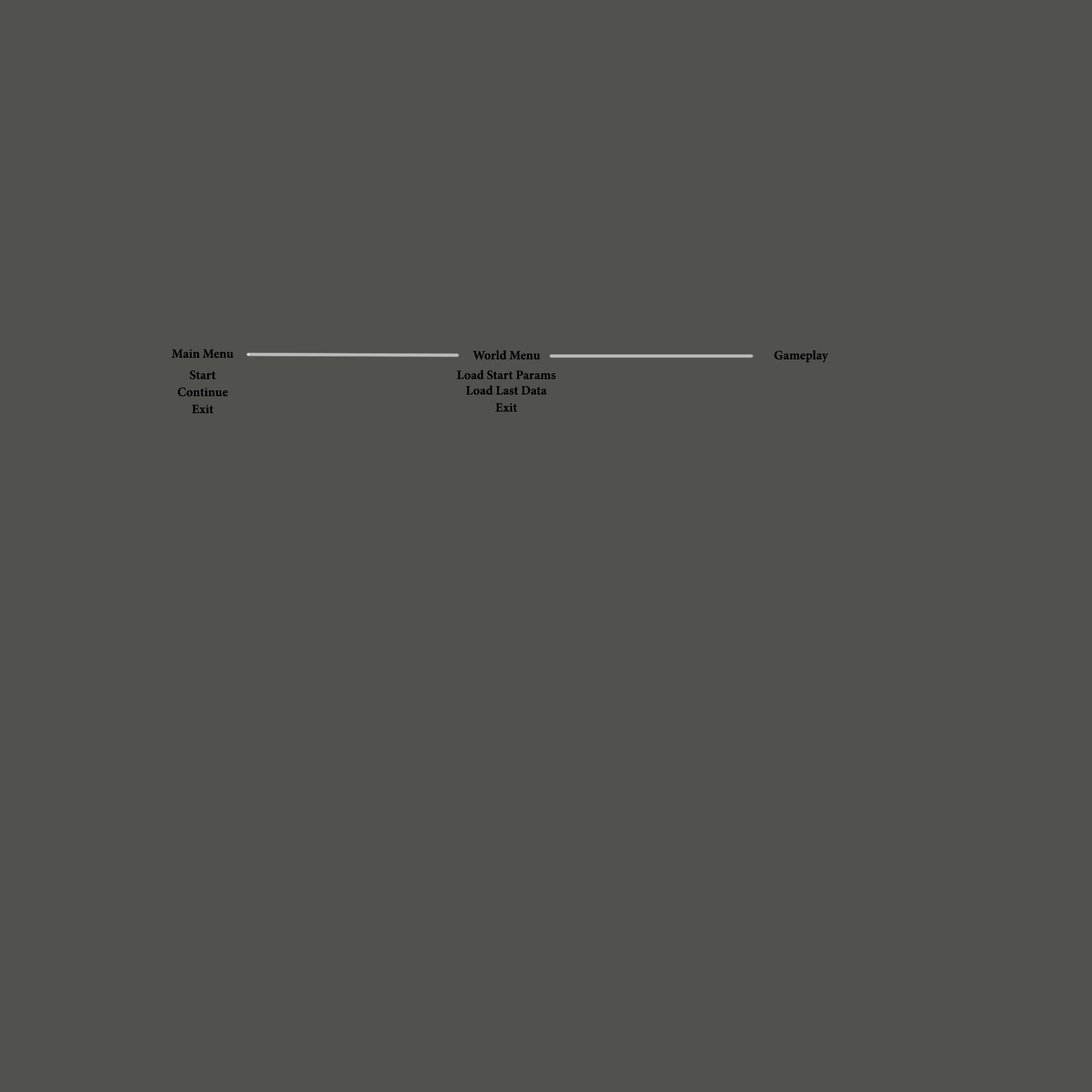
<style>
.page{position:relative;width:1092px;height:1092px;background:#51514d}
.page>*{position:absolute;margin:0}
.t1{font:12.8px "MinionPro-Bold";color:#000000}
</style>
<div class="page">
<p class="t1" style="left:172px;top:349px;width:62px;height:9px">Main Menu</p>
<p class="t1" style="left:473px;top:350px;width:67px;height:10px">World Menu</p>
<p class="t1" style="left:774px;top:350px;width:55px;height:13px">Gameplay</p>
<p class="t1" style="left:190px;top:370px;width:26px;height:10px">Start</p>
<p class="t1" style="left:457px;top:370px;width:99px;height:10px">Load Start Params</p>
<p class="t1" style="left:178px;top:387px;width:50px;height:10px">Continue</p>
<p class="t1" style="left:465px;top:385px;width:82px;height:10px">Load Last Data</p>
<p class="t1" style="left:192px;top:405px;width:22px;height:9px">Exit</p>
<p class="t1" style="left:495px;top:403px;width:22px;height:9px">Exit</p>
</div>
